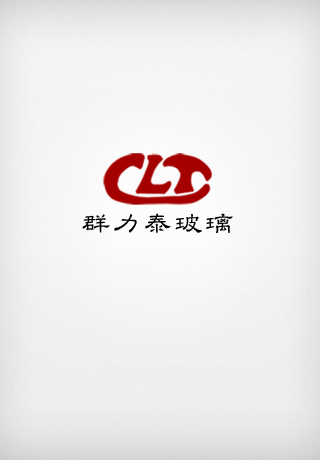
<style>
.page{position:relative;width:320px;height:460px}
.page>*{position:absolute;margin:0}
.t1{font:30px "DFKuoTaiBeiStd-W4";letter-spacing:0.025em;color:#000000}
</style>
<div class="page">
<p class="t1" style="left:82px;top:213px;width:151px;height:21px">群力泰玻璃</p>
</div>
